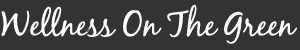
<style>
.page{position:relative;width:300px;height:50px;background:#333333}
.page>*{position:absolute;margin:0}
.t1{font:34px "BlackJackRegular";color:#ffffff}
</style>
<div class="page">
<p class="t1" style="left:1px;top:4px;width:296px;height:40px">Wellness On The Green</p>
</div>
